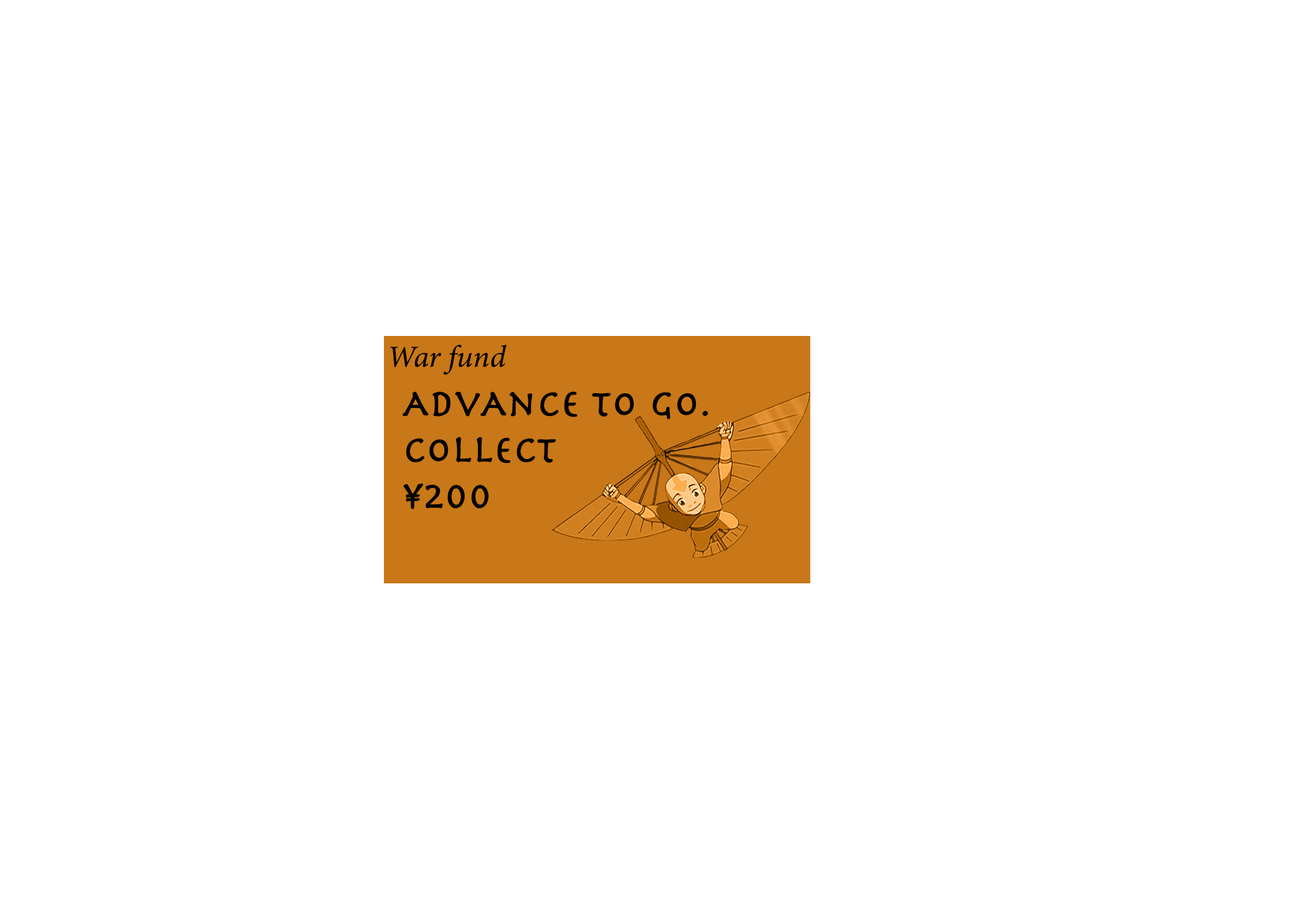
<style>
.page{position:relative;width:1292px;height:923px;background:#ffffff}
.page>*{position:absolute;margin:0}
.t1{font:30.8px "MinionConceptItalic-MediumItalic";color:#000000;font-weight:bold}
.t2{font:38.5px "Herculanum";color:#000000;font-weight:bold}
</style>
<div class="page">
<p class="t1" style="left:390px;top:345px;width:116px;height:30px">War fund</p>
<p class="t2" style="left:402px;top:391px;width:306px;height:118px">AdvAnce to go.<br>collect <br>¥200</p>
</div>
